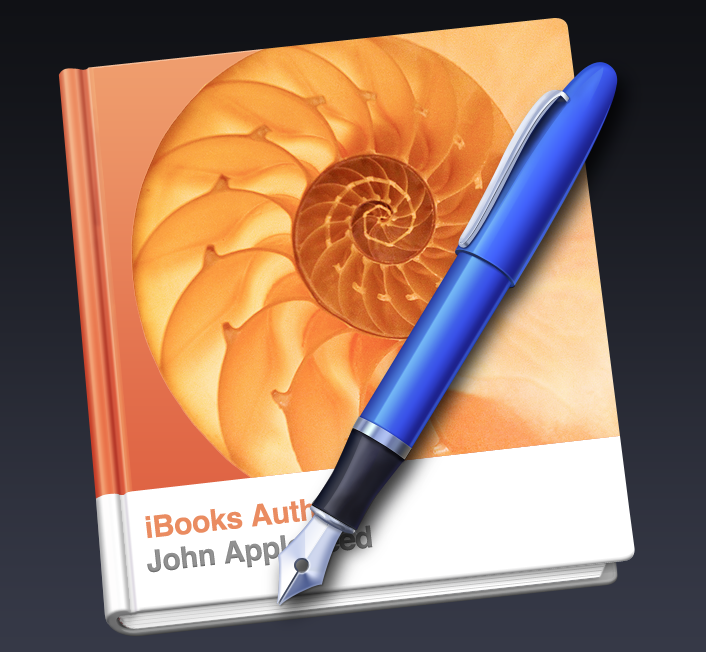
<style>
.page{position:relative;width:706px;height:652px}
.page>*{position:absolute;margin:0}
.t1{font:30px "Helvetica-Bold";letter-spacing:-0.01em;color:#ea8c61}
.t2{font:30px "Helvetica-Bold";letter-spacing:-0.01em}
</style>
<div class="page">
<p class="t1" style="left:145px;top:499px;width:201px;height:40px;rotate:-6deg">iBooks Author</p>
<p class="t2" style="left:147px;top:525px;width:226px;height:48px;rotate:-6deg">John AppleSeed</p>
</div>
